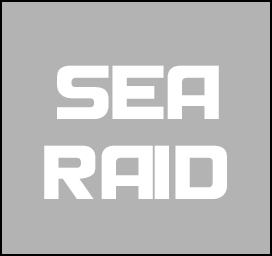
<style>
.page{position:relative;width:272px;height:256px;background:#b3b3b3}
.page>*{position:absolute;margin:0}
.t1{font:66.7px "HyundaiNormal";color:#ffffff}
</style>
<div class="page">
<p class="t1" style="left:44px;top:65px;width:183px;height:134px;text-align:center">sea<br>raid</p>
</div>
